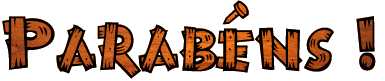
<style>
.page{position:relative;width:385px;height:81px;background:#ffffff}
.page>*{position:absolute;margin:0}
.t1{font:85.4px "BurnstownDam-Regular";color:#000000}
</style>
<div class="page">
<p class="t1" style="left:2px;top:0px;width:374px;height:79px">Parabéns !</p>
</div>
